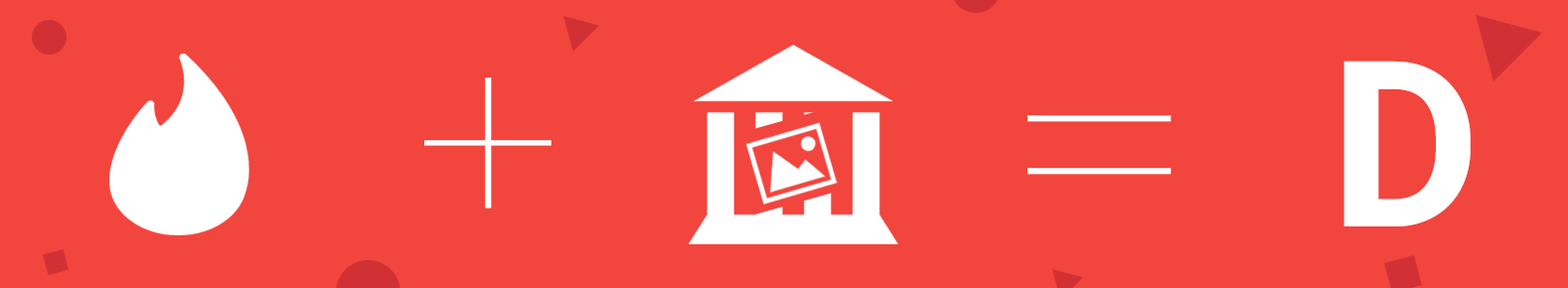
<style>
.page{position:relative;width:1568px;height:288px;background:#f2453e}
.page>*{position:absolute;margin:0}
.t1{font:232.1px "Roboto-Bold";color:#ffffff}
.t2{font:271.6px "AvenirNext-UltraLight";color:#ffffff}
.t3{font:307.8px "AvenirNext-UltraLight";color:#ffffff}
</style>
<div class="page">
<p class="t1" style="left:1343px;top:61px;width:128px;height:166px">D</p>
<p class="t2" style="left:424px;top:78px;width:127px;height:131px">+</p>
<p class="t3" style="left:1027px;top:115px;width:145px;height:60px">=</p>
</div>
